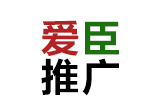
<style>
.page{position:relative;width:160px;height:104px;background:#ffffff}
.page>*{position:absolute;margin:0}
.t1{font:40px/39px "FZLTCHJW--GB1-0";letter-spacing:0.025em;color:#000000}
.t2{font:40px/39px "FZLTCHJW--GB1-0";letter-spacing:0.025em;color:#b52121}
.t3{font:40px/39px "FZLTCHJW--GB1-0";letter-spacing:0.025em;color:#1b710c}
</style>
<div class="page">
<p class="t1" style="left:41px;top:20px;width:78px;height:76px"><span class="t2">爱</span><span class="t3">臣<br></span>推广</p>
</div>
